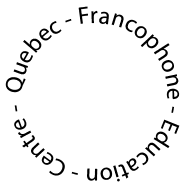
<style>
.page{position:relative;width:189px;height:189px;background:#ffffff}
.page>*{position:absolute;margin:0}
.t1{font:24px "MyriadPro-Regular";letter-spacing:0.005em;color:#000000}
</style>
<div class="page">
<p class="t1" style="left:5px;top:6px;width:175px;height:176px">Quebec - Francophone - Education - Centre -</p>
</div>
